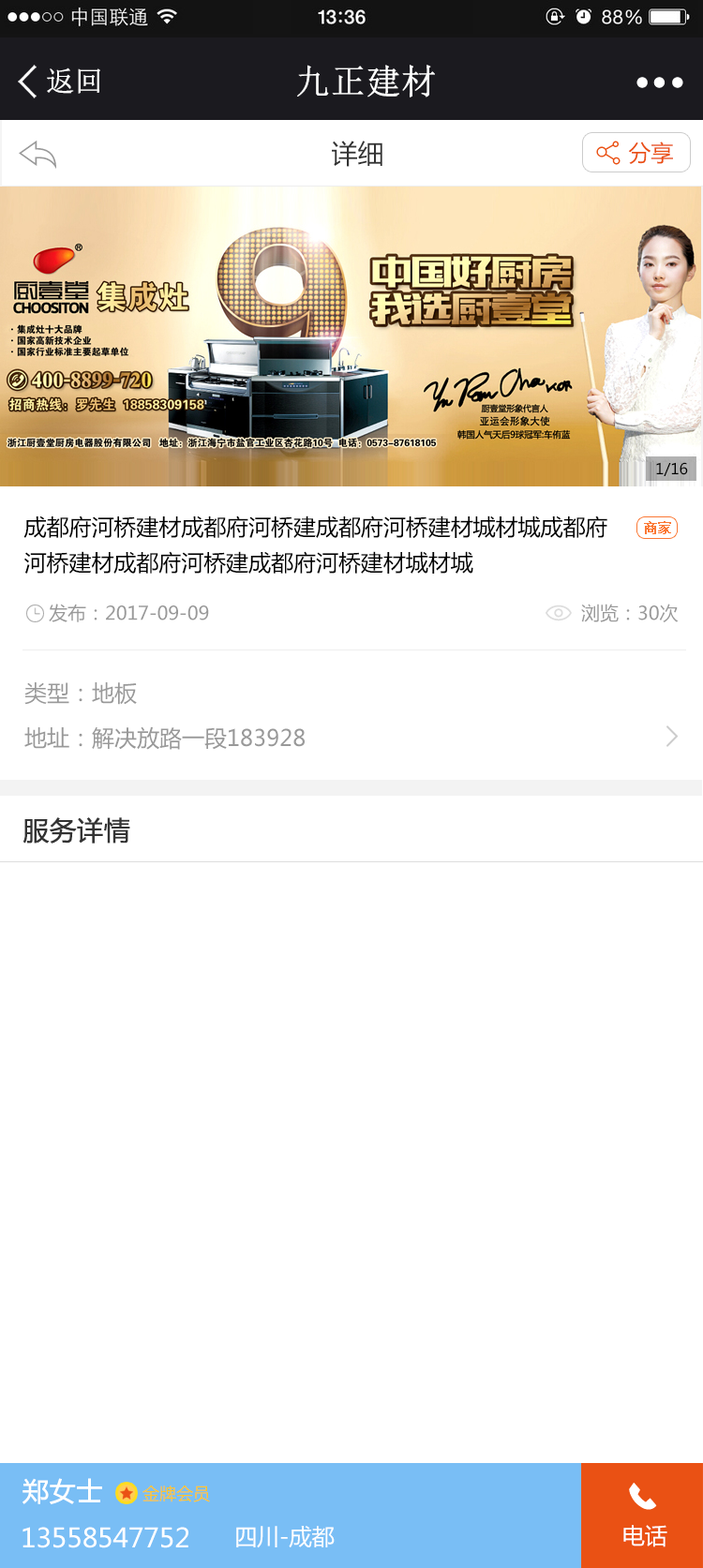
<style>
.page{position:relative;width:703px;height:1568px;background:#ffffff}
.page>*{position:absolute;margin:0}
.t1{font:34.4px "NSimSun";color:#ffffff;font-weight:bold}
.t2{font:28.1px "NSimSun";color:#ffffff;font-weight:bold}
.t3{font:26.2px "MicrosoftYaHei";color:#333333}
.t4{font:26.2px "MicrosoftYaHei";color:#333333;font-weight:bold}
.t5{font:22.5px "MicrosoftYaHei";color:#ea5114}
.t6{font:26.2px "MicrosoftYaHei";color:#999999;font-weight:bold}
.t7{font:15px "MicrosoftYaHei";color:#000000}
.t8{font:22.5px/35.6px "MicrosoftYaHei";color:#000000}
.t9{font:13.1px "NSimSun";color:#fb7834;font-weight:bold}
.t10{font:18.7px "MicrosoftYaHei";color:#999999}
.t11{font:22.5px/45px "MicrosoftYaHei";color:#999999}
.t12{font:26.2px "MicrosoftYaHei";color:#ffffff;font-weight:bold}
.t13{font:16.9px "MicrosoftYaHei";color:#ffc42a}
.t14{font:26.2px "MicrosoftYaHei";color:#ffffff}
.t15{font:22.5px "MicrosoftYaHei";color:#ffffff}
</style>
<div class="page">
<p class="t1" style="left:297px;top:65px;width:138px;height:32px">九正建材</p>
<p class="t2" style="left:47px;top:67px;width:53px;height:27px">返回</p>
<p class="t3" style="left:332px;top:141px;width:50px;height:26px"><span class="t4"><br></span>详细</p>
<p class="t5" style="left:628px;top:142px;width:45px;height:22px"><span class="t6"><br></span>分享</p>
<p class="t7" style="left:656px;top:462px;width:32px;height:14px">1/16</p>
<p class="t8" style="left:23px;top:515px;width:584px;height:59px">成都府河桥建材成都府河桥建成都府河桥建材城材城成都府<br>河桥建材成都府河桥建成都府河桥建材城材城</p>
<p class="t9" style="left:644px;top:521px;width:27px;height:13px">商家</p>
<p class="t10" style="left:49px;top:604px;width:160px;height:18px">发布：2017-09-09</p>
<p class="t10" style="left:581px;top:604px;width:98px;height:18px">浏览：30次</p>
<p class="t11" style="left:24px;top:682px;width:281px;height:68px">类型：地板<br>地址：解决放路一段183928</p>
<p class="t4" style="left:22px;top:817px;width:108px;height:27px">服务详情</p>
<p class="t12" style="left:22px;top:1478px;width:80px;height:26px">郑女士</p>
<p class="t13" style="left:142px;top:1486px;width:68px;height:16px">金牌会员</p>
<p class="t14" style="left:22px;top:1527px;width:166px;height:21px">13558547752</p>
<p class="t15" style="left:236px;top:1526px;width:99px;height:22px">四川-成都</p>
<p class="t15" style="left:623px;top:1525px;width:44px;height:22px">电话</p>
</div>
